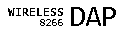
<style>
.page{position:relative;width:128px;height:32px;background:#ffffff}
.page>*{position:absolute;margin:0}
.t1{font:11px "Hack-Bold";color:#000000}
.t2{font:30px "Consolas";color:#000000}
.t3{font:11px "Consolas";color:#000000}
</style>
<div class="page">
<p class="t1" style="left:8px;top:8px;width:55px;height:8px">WIRELESS</p>
<p class="t2" style="left:71px;top:7px;width:45px;height:19px">DAP</p>
<p class="t3" style="left:40px;top:19px;width:23px;height:7px">8266</p>
</div>
